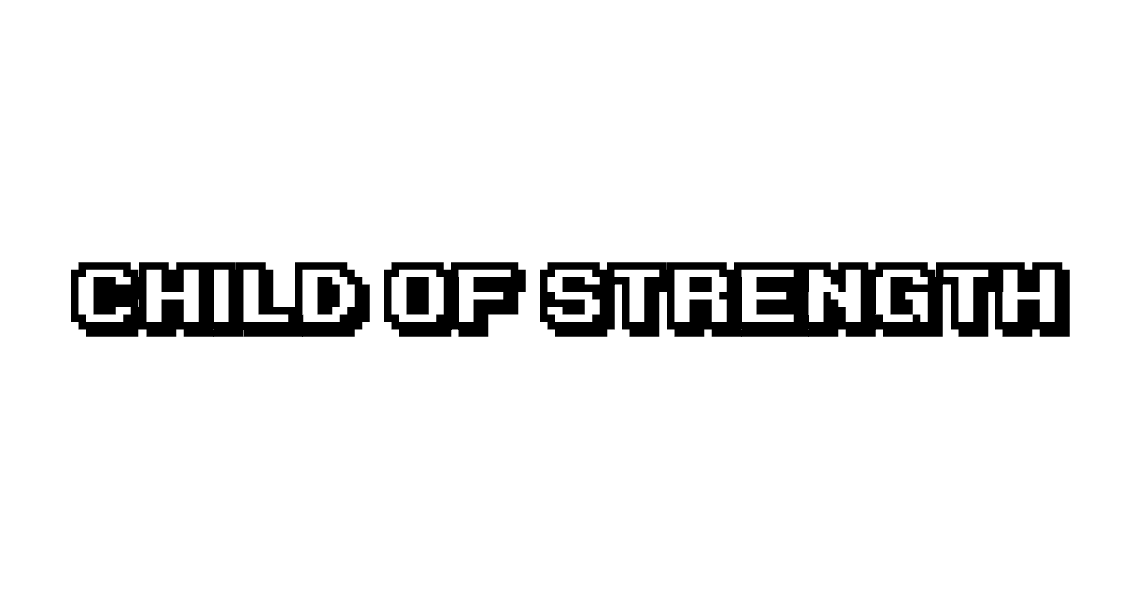
<style>
.page{position:relative;width:1141px;height:600px;background:#ffffff}
.page>*{position:absolute;margin:0}
.t1{font:76.5px "KarmaticArcade";color:#000000}
</style>
<div class="page">
<p class="t1" style="left:71px;top:262px;width:999px;height:75px">Child of strength</p>
</div>
